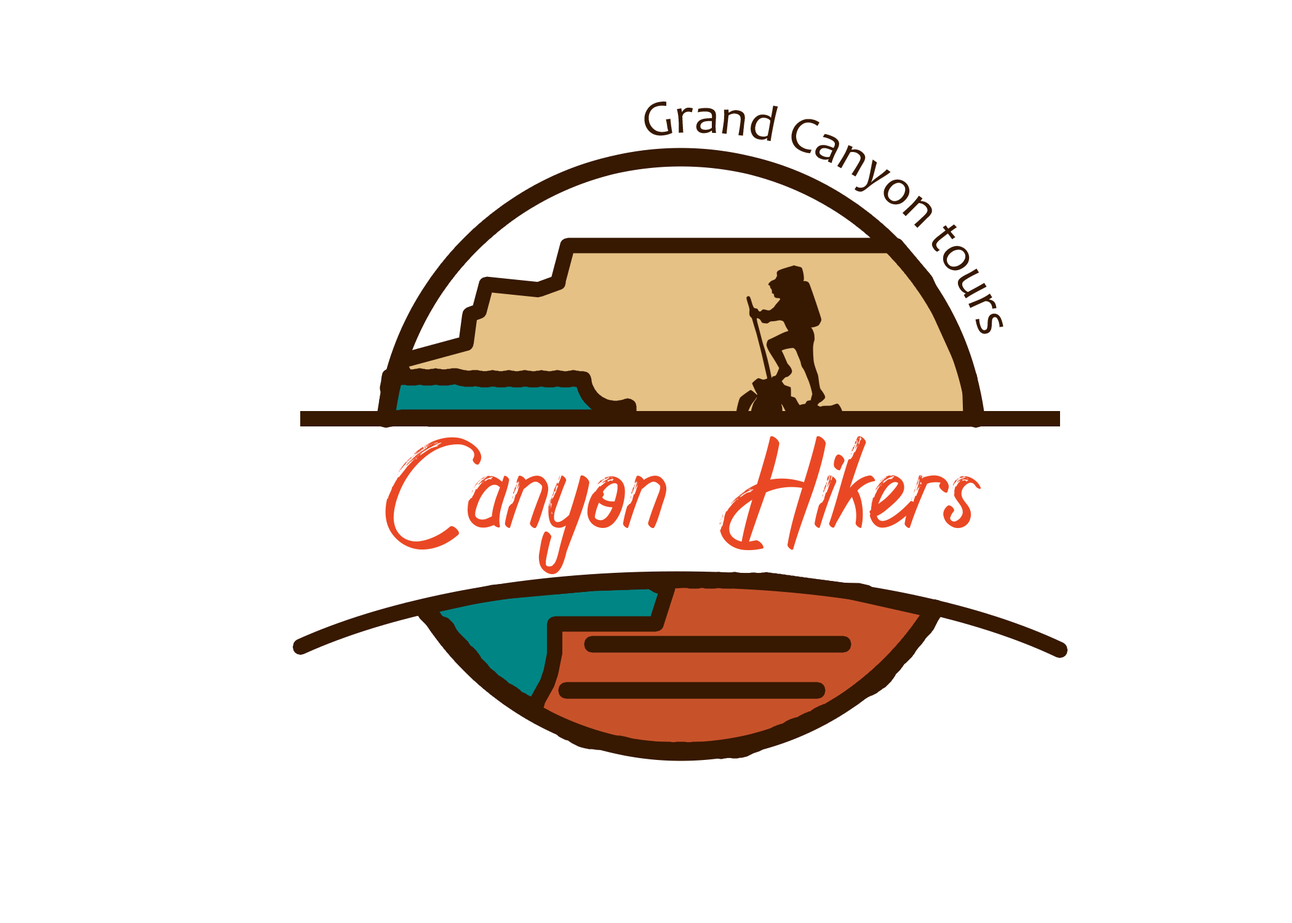
<style>
.page{position:relative;width:1292px;height:923px;background:#ffffff}
.page>*{position:absolute;margin:0}
.t1{font:51.3px/92.3px "Candara";color:#371800}
.t2{font:102.5px "DearthDanceDemoRegular";color:#ea4824}
</style>
<div class="page">
<p class="t1" style="left:644px;top:102px;width:359px;height:232px;text-align:center">Grand Canyon tours</p>
<p class="t2" style="left:385px;top:436px;width:596px;height:139px">Canyon Hikers</p>
</div>
